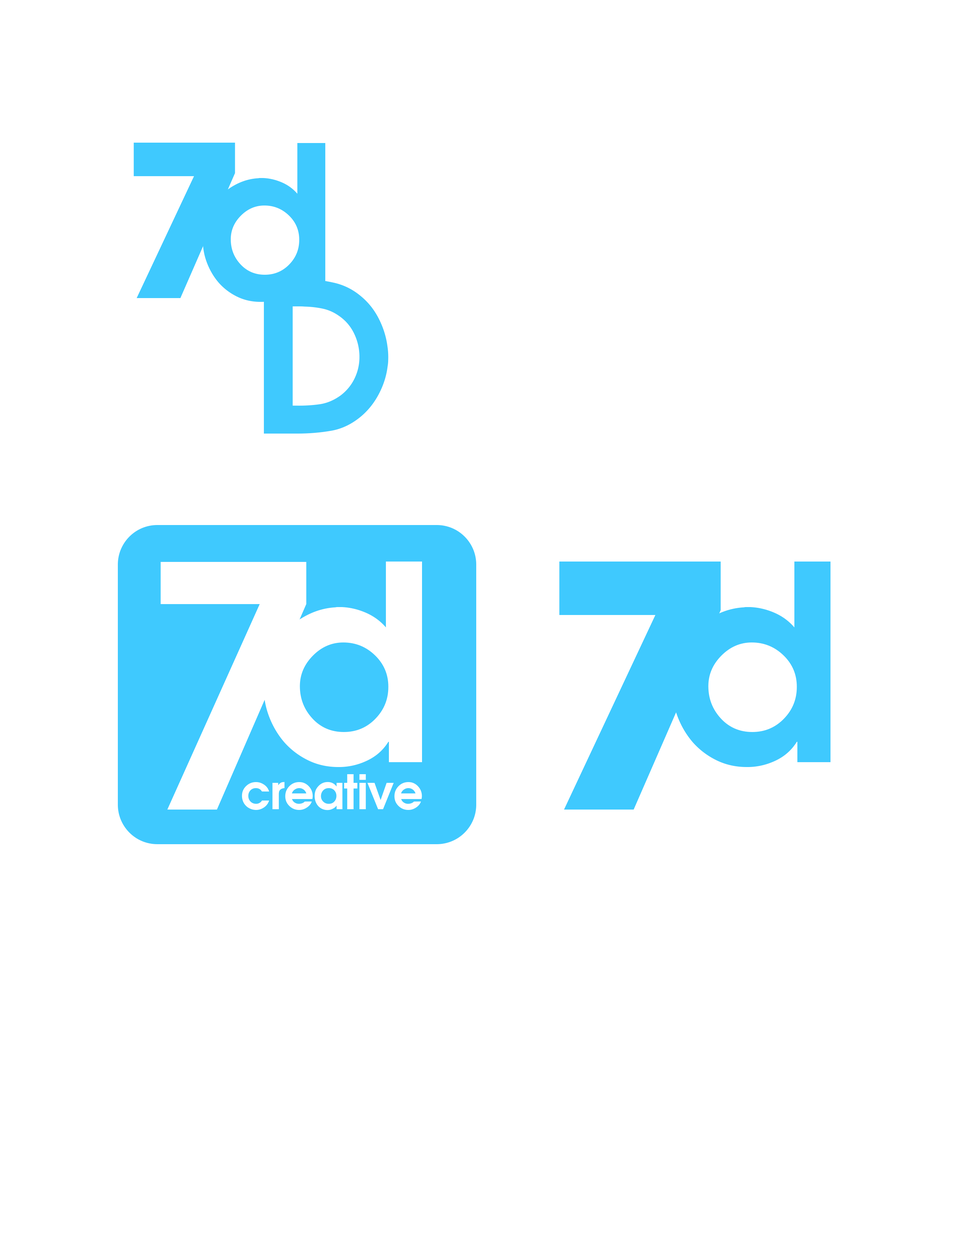
<style>
.page{position:relative;width:960px;height:1242px;background:#ffffff}
.page>*{position:absolute;margin:0}
.t1{font:210.2px "AvantGardeLT-Bold";letter-spacing:-0.06em;color:#3fc9fe}
.t2{font:210.2px "AvantGarde-Demi";letter-spacing:-0.06em;color:#3fc9fe}
.t3{font:335.2px "AvantGarde-Demi";letter-spacing:-0.06em;color:#ffffff}
.t4{font:271.3px "AvantGarde-Demi";letter-spacing:-0.06em;color:#ffffff}
.t5{font:335.2px "AvantGardeLT-Bold";letter-spacing:-0.06em;color:#3fc9fe}
.t6{font:271.3px "AvantGarde-Demi";letter-spacing:-0.06em;color:#3fc9fe}
.t7{font:47.4px "AvantGarde-Demi";letter-spacing:-0.02em;color:#ffffff}
</style>
<div class="page">
<p class="t1" style="left:134px;top:143px;width:101px;height:155px">7</p>
<p class="t2" style="left:203px;top:143px;width:123px;height:159px">d</p>
<p class="t2" style="left:264px;top:279px;width:124px;height:155px">D</p>
<p class="t3" style="left:160px;top:562px;width:146px;height:248px">7</p>
<p class="t4" style="left:264px;top:562px;width:158px;height:205px">d</p>
<p class="t5" style="left:559px;top:562px;width:162px;height:248px">7</p>
<p class="t6" style="left:672px;top:562px;width:158px;height:205px">d</p>
<p class="t7" style="left:242px;top:774px;width:180px;height:36px">creative</p>
</div>
